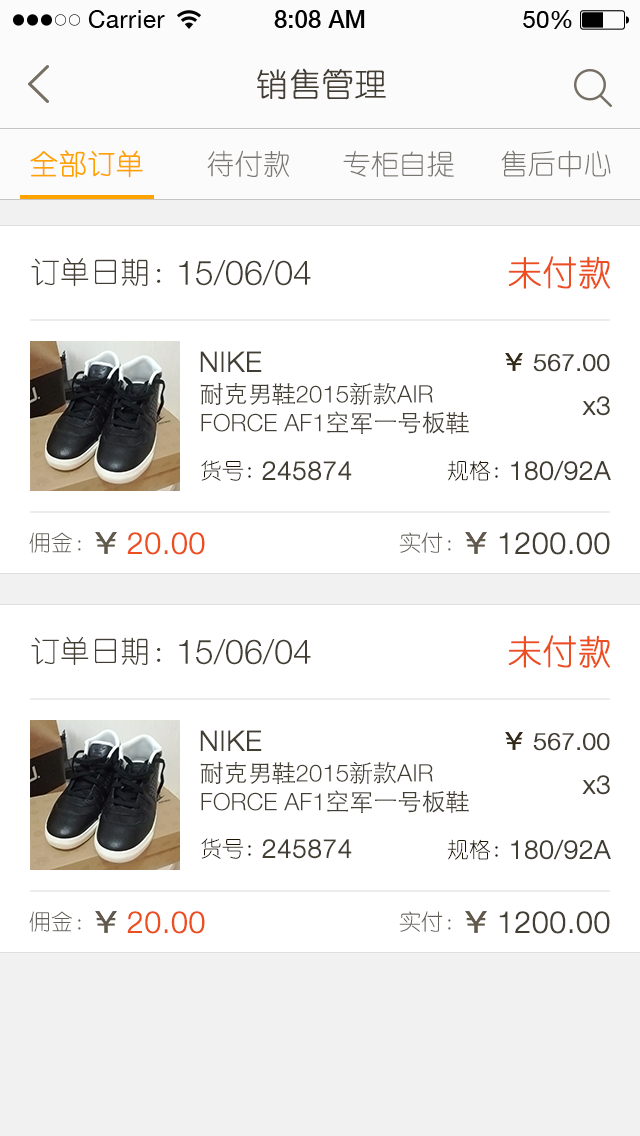
<style>
.page{position:relative;width:640px;height:1136px;background:#ffffff}
.page>*{position:absolute;margin:0}
.t1{font:32px "YouYuan";color:#433d33;text-transform:uppercase;font-weight:bold}
.t2{font:28px "YouYuan";color:#fea200;text-transform:uppercase;font-weight:bold}
.t3{font:28px "YouYuan";color:#7a7772;text-transform:uppercase}
.t4{font:34px "YouYuan";color:#ed4e1f;text-transform:uppercase;font-weight:bold}
.t5{font:30px "YouYuan";color:#433e34;text-transform:uppercase}
.t6{font:34px "HelveticaNeueLTPro-Lt";color:#433e34;text-transform:uppercase}
.t7{font:28px "HelveticaNeueLTPro-Lt";color:#433e34;text-transform:uppercase;font-weight:bold}
.t8{font:24px "HelveticaNeueLTPro-Lt";color:#433e34;text-transform:uppercase;font-weight:bold}
.t9{font:24px "HelveticaNeueLTPro-Lt";color:#433e34;text-transform:uppercase}
.t10{font:24px "STHeitiSC-Light";color:#433e34;text-transform:uppercase}
.t11{font:26px "HelveticaNeueLTPro-Lt";color:#433e34;font-weight:bold}
.t12{font:22px "YouYuan";color:#1b1100;text-transform:uppercase}
.t13{font:26px "HelveticaNeueLTPro-Lt";color:#433e34;text-transform:uppercase;font-weight:bold}
.t14{font:22px "YouYuan";color:#625e58;text-transform:uppercase}
.t15{font:30px "HelveticaNeueLTPro-Lt";color:#ed4e1f;text-transform:uppercase;font-weight:bold}
.t16{font:30px "HelveticaNeueLTPro-Lt";color:#433e34;text-transform:uppercase;font-weight:bold}
</style>
<div class="page">
<p class="t1" style="left:257px;top:68px;width:129px;height:32px">销售管理</p>
<p class="t2" style="left:30px;top:150px;width:113px;height:28px">全部订单</p>
<p class="t3" style="left:207px;top:150px;width:82px;height:27px">待付款</p>
<p class="t3" style="left:343px;top:150px;width:111px;height:27px">专柜自提</p>
<p class="t3" style="left:501px;top:150px;width:110px;height:27px">售后中心</p>
<p class="t4" style="left:508px;top:256px;width:102px;height:33px">未付款</p>
<p class="t5" style="left:31px;top:258px;width:130px;height:28px">订单日期：</p>
<p class="t6" style="left:179px;top:260px;width:132px;height:26px">15/06/04</p>
<p class="t7" style="left:200px;top:351px;width:62px;height:21px">NIKE</p>
<p class="t8" style="left:533px;top:354px;width:77px;height:18px">567.00</p>
<p class="t9" style="left:200px;top:382px;width:269px;height:52px"><span class="t10">耐克男鞋</span>2015<span class="t10">新款</span>air force AF1<span class="t10">空军一号板鞋</span></p>
<p class="t11" style="left:582px;top:396px;width:28px;height:20px">x3</p>
<p class="t12" style="left:201px;top:460px;width:50px;height:21px">货号:</p>
<p class="t13" style="left:262px;top:461px;width:90px;height:20px">245874</p>
<p class="t12" style="left:447px;top:460px;width:51px;height:21px">规格:</p>
<p class="t13" style="left:511px;top:460px;width:100px;height:21px">180/92a</p>
<p class="t14" style="left:29px;top:532px;width:52px;height:21px">佣金：</p>
<p class="t15" style="left:127px;top:532px;width:78px;height:23px">20.00</p>
<p class="t14" style="left:399px;top:532px;width:52px;height:21px">实付：</p>
<p class="t16" style="left:499px;top:532px;width:111px;height:23px">1200.00</p>
<p class="t5" style="left:31px;top:637px;width:130px;height:28px">订单日期：</p>
<p class="t6" style="left:179px;top:639px;width:132px;height:26px">15/06/04</p>
<p class="t4" style="left:508px;top:635px;width:102px;height:33px">未付款</p>
<p class="t7" style="left:200px;top:730px;width:62px;height:21px">NIKE</p>
<p class="t8" style="left:533px;top:733px;width:77px;height:18px">567.00</p>
<p class="t9" style="left:200px;top:761px;width:269px;height:52px"><span class="t10">耐克男鞋</span>2015<span class="t10">新款</span>air force AF1<span class="t10">空军一号板鞋</span></p>
<p class="t11" style="left:582px;top:775px;width:28px;height:20px">x3</p>
<p class="t12" style="left:201px;top:838px;width:50px;height:21px">货号:</p>
<p class="t13" style="left:262px;top:839px;width:90px;height:20px">245874</p>
<p class="t12" style="left:447px;top:839px;width:51px;height:21px">规格:</p>
<p class="t13" style="left:511px;top:839px;width:100px;height:21px">180/92a</p>
<p class="t14" style="left:29px;top:911px;width:52px;height:21px">佣金：</p>
<p class="t15" style="left:127px;top:911px;width:78px;height:23px">20.00</p>
<p class="t14" style="left:399px;top:911px;width:52px;height:21px">实付：</p>
<p class="t16" style="left:499px;top:911px;width:111px;height:23px">1200.00</p>
</div>
